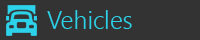
<style>
.page{position:relative;width:200px;height:40px;background:#333333}
.page>*{position:absolute;margin:0}
.t1{font:25px "SegoeUI-Semilight";color:#2cd1ea}
</style>
<div class="page">
<p class="t1" style="left:47px;top:10px;width:85px;height:19px">Vehicles</p>
</div>
